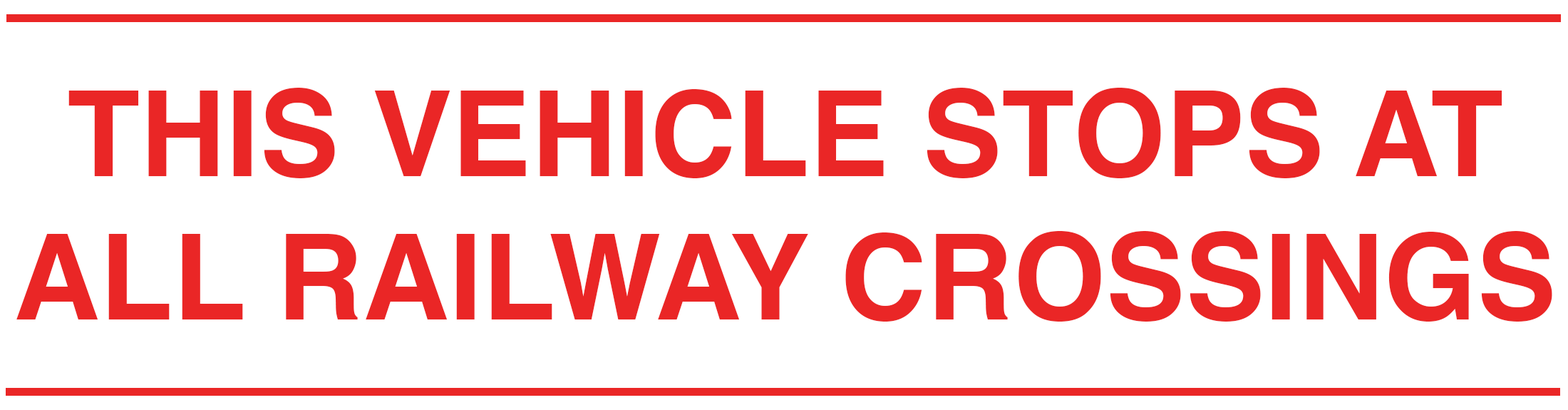
<style>
.page{position:relative;width:1568px;height:410px;background:#ffffff}
.page>*{position:absolute;margin:0}
.t1{font:119.3px "Helvetica-Bold";color:#ea2626}
</style>
<div class="page">
<p class="t1" style="left:16px;top:88px;width:1536px;height:233px;text-align:center">THIS VEHICLE STOPS AT<br>ALL RAILWAY CROSSINGS</p>
</div>
